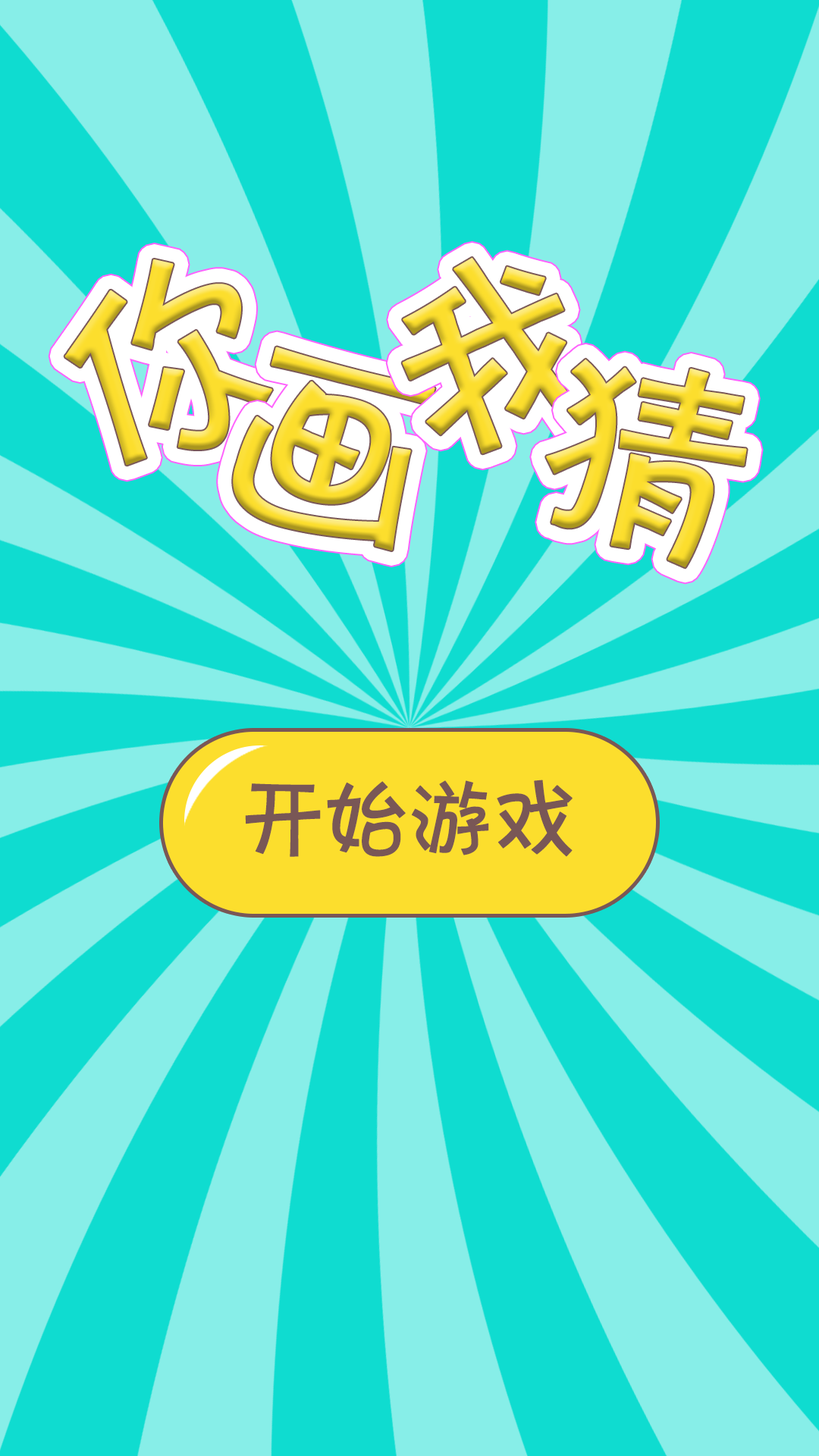
<style>
.page{position:relative;width:819px;height:1456px;background:#0fdcd0}
.page>*{position:absolute;margin:0}
.t1{font:227.5px "Jkaton";font-weight:bold}
.t2{font:227.5px "Jkaton";color:#fcde2d;font-weight:bold}
.t3{font:91px "Jkaton";letter-spacing:-0.1em;color:#795756;font-weight:bold}
</style>
<div class="page">
<p class="t1" style="left:402px;top:257px;width:183px;height:197px;rotate:-15deg">我</p>
<p class="t2" style="left:64px;top:259px;width:208px;height:207px;rotate:-15deg">你</p>
<p class="t1" style="left:233px;top:347px;width:202px;height:204px;rotate:15deg">画</p>
<p class="t1" style="left:546px;top:359px;width:201px;height:209px;rotate:15deg">猜</p>
<p class="t3" style="left:245px;top:780px;width:328px;height:77px">开始游戏</p>
</div>
